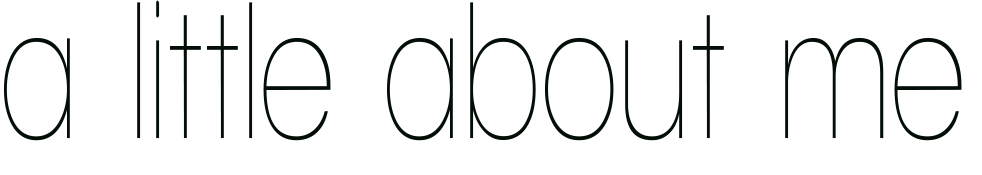
<style>
.page{position:relative;width:982px;height:175px;background:#ffffff}
.page>*{position:absolute;margin:0}
.t1{font:200px "WalkwayCondensed";color:#020e06}
</style>
<div class="page">
<p class="t1" style="left:4px;top:0px;width:958px;height:141px">a little about me</p>
</div>
